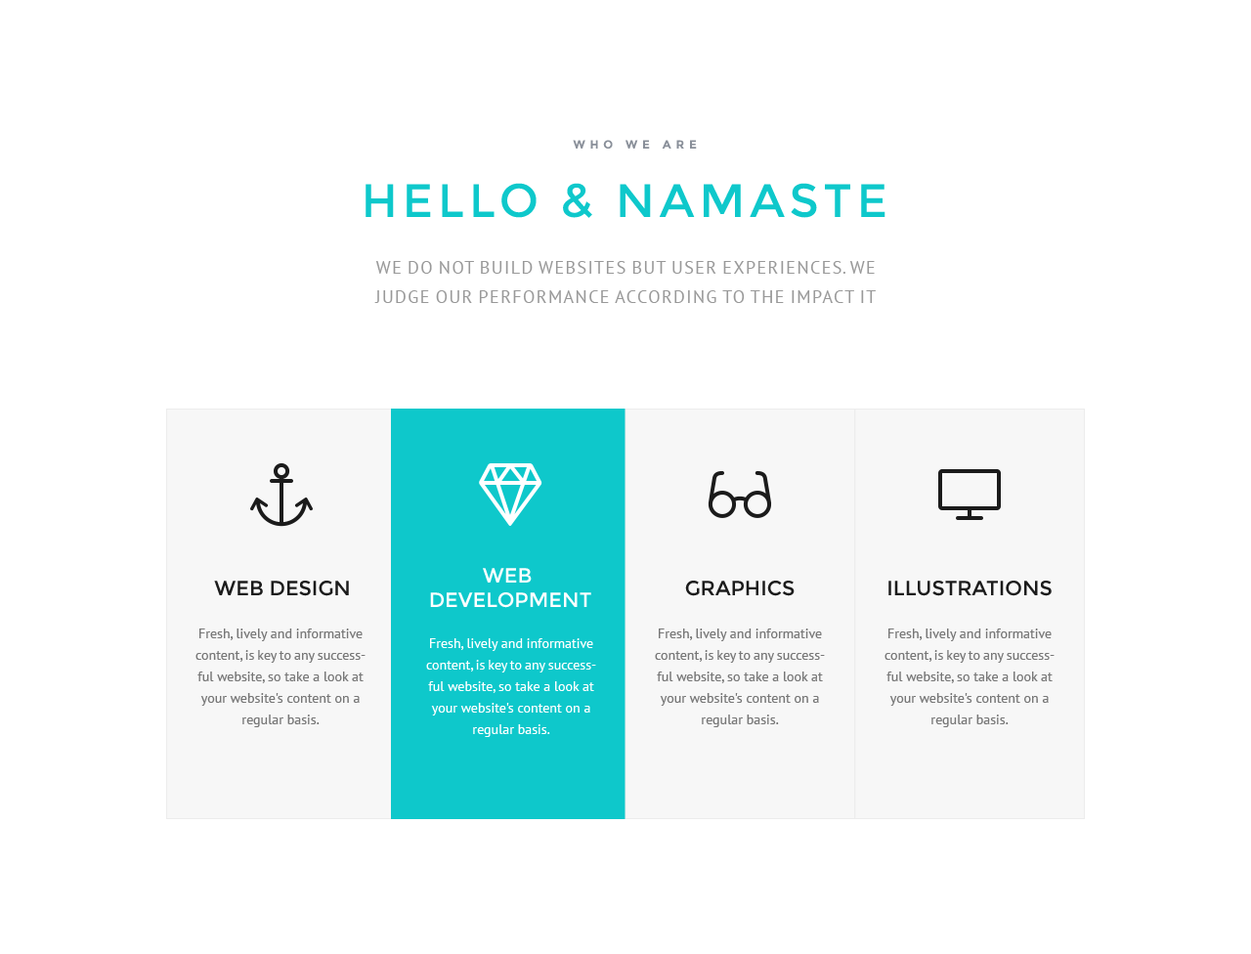
<style>
.page{position:relative;width:1251px;height:954px;background:#ffffff}
.page>*{position:absolute;margin:0}
.t1{font:11.7px "Montserrat-Bold";letter-spacing:0.4em;color:#898f99;text-transform:uppercase}
.t2{font:46.9px "Montserrat-Regular";letter-spacing:0.1em;color:#0ec8cb;text-transform:uppercase}
.t3{font:17.6px/29.3px "PTSans-Regular";color:#999999;text-transform:uppercase}
.t4{font:20.5px "Montserrat-Regular";color:#ffffff;text-transform:uppercase}
.t5{font:20.5px "Montserrat-Regular";color:#1b1b1b;text-transform:uppercase}
.t6{font:13.7px/21.5px "PTSans-Regular";color:#777777}
.t7{font:13.7px/21.5px "PTSans-Regular";color:#ffffff}
</style>
<div class="page">
<p class="t1" style="left:573px;top:140px;width:124px;height:9px">who we are</p>
<p class="t2" style="left:365px;top:183px;width:520px;height:35px">Hello &amp; Namaste</p>
<p class="t3" style="left:374px;top:261px;width:501px;height:42px;text-align:center">We do not build websites but user experiences. We judge our performance according to the impact it makes</p>
<p class="t4" style="left:430px;top:568px;width:161px;height:40px;text-align:center">web <br>development</p>
<p class="t5" style="left:214px;top:580px;width:135px;height:16px">web design</p>
<p class="t5" style="left:685px;top:580px;width:109px;height:16px">Graphics</p>
<p class="t5" style="left:888px;top:580px;width:163px;height:16px">Illustrations</p>
<p class="t6" style="left:195px;top:628px;width:170px;height:99px;text-align:center">Fresh, lively and informative content, is key to any successful website, so take a look at your website's content on a regular basis.</p>
<p class="t6" style="left:655px;top:628px;width:170px;height:99px;text-align:center">Fresh, lively and informative content, is key to any successful website, so take a look at your website's content on a regular basis.</p>
<p class="t6" style="left:884px;top:628px;width:170px;height:99px;text-align:center">Fresh, lively and informative content, is key to any successful website, so take a look at your website's content on a regular basis.</p>
<p class="t7" style="left:426px;top:638px;width:170px;height:99px;text-align:center">Fresh, lively and informative content, is key to any successful website, so take a look at your website's content on a regular basis.</p>
</div>
